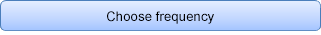
<style>
.page{position:relative;width:321px;height:35px}
.page>*{position:absolute;margin:0}
.t1{font:13.3px "ArialMT";color:#000000}
</style>
<div class="page">
<p class="t1" style="left:107px;top:11px;width:107px;height:13px">Choose frequency</p>
</div>
